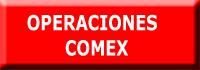
<style>
.page{position:relative;width:200px;height:70px;background:#ff0000}
.page>*{position:absolute;margin:0}
.t1{font:21px "Verdana-Bold";color:#ffffff;scale:0.76 1}
</style>
<div class="page">
<p class="t1" style="left:27px;top:14px;width:130px;height:42px">OPERACIONES<br>       COMEX</p>
</div>
